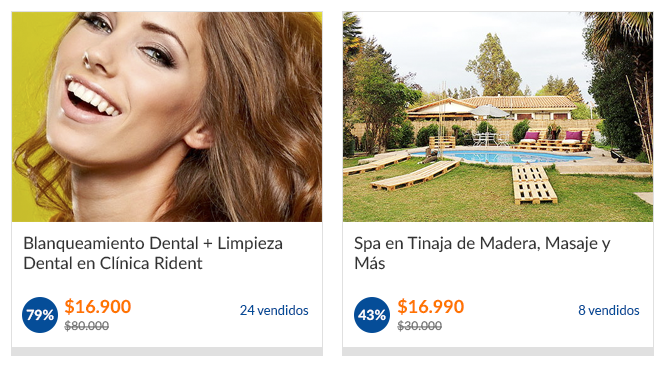
<style>
.page{position:relative;width:666px;height:370px;background:#ffffff}
.page>*{position:absolute;margin:0}
.t1{font:17px/20px "Lato-Medium";color:#333333}
.t2{font:18px "Lato-Heavy";color:#ff7500}
.t3{font:12px/17px "Lato-Medium";color:#6f6f6f}
.t4{font:13px "Lato-Regular";color:#054d98}
.t5{font:14px "Lato-Heavy";color:#ffffff}
</style>
<div class="page">
<p class="t1" style="left:24px;top:236px;width:259px;height:34px">Blanqueamiento Dental + Limpieza Dental en Clínica Rident</p>
<p class="t1" style="left:354px;top:236px;width:257px;height:34px">Spa en Tinaja de Madera, Masaje y Más</p>
<p class="t2" style="left:64px;top:298px;width:67px;height:34px">$16.900<br><span class="t3">$80.000</span></p>
<p class="t4" style="left:240px;top:305px;width:69px;height:10px">24 vendidos</p>
<p class="t2" style="left:397px;top:298px;width:67px;height:34px">$16.990<br><span class="t3">$30.000</span></p>
<p class="t4" style="left:578px;top:305px;width:62px;height:10px">8 vendidos</p>
<p class="t5" style="left:26px;top:309px;width:28px;height:12px">79%</p>
<p class="t5" style="left:358px;top:309px;width:28px;height:12px">43%</p>
</div>
